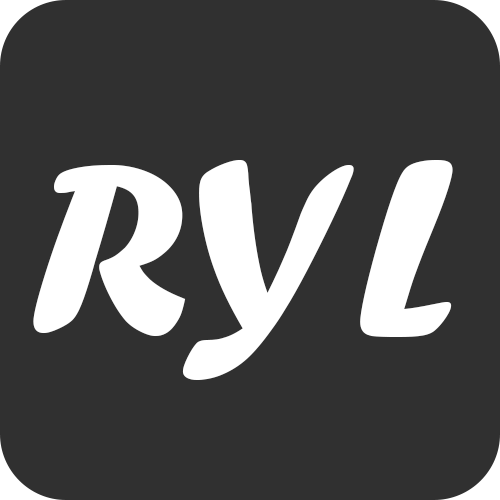
<style>
.page{position:relative;width:500px;height:500px;background:#303030}
.page>*{position:absolute;margin:0}
.t1{font:260px "ForteMT";color:#ffffff}
</style>
<div class="page">
<p class="t1" style="left:33px;top:160px;width:420px;height:220px">RYL</p>
</div>
